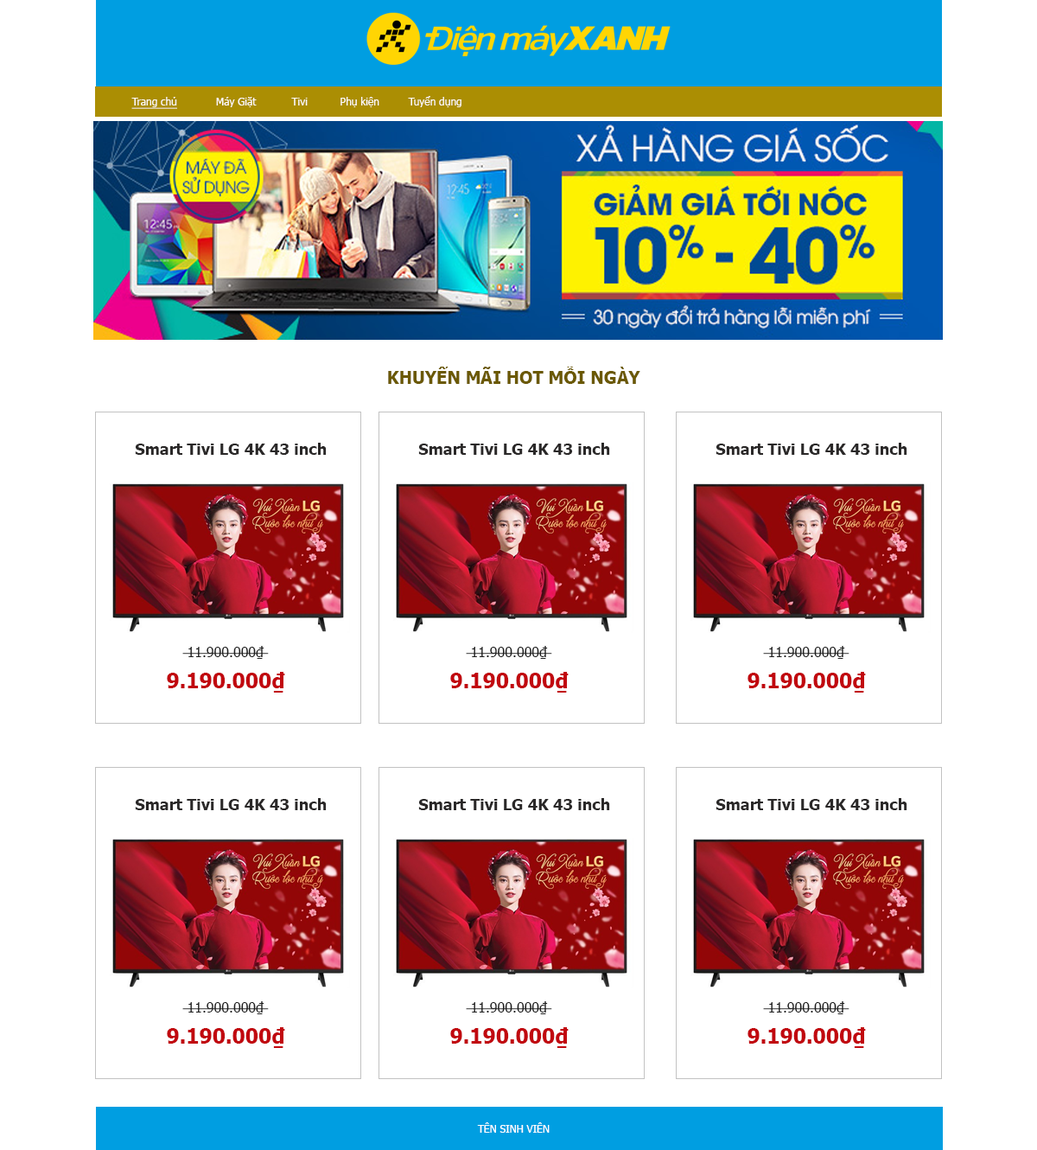
<style>
.page{position:relative;width:1037px;height:1150px;background:#ffffff}
.page>*{position:absolute;margin:0}
.t1{font:10.4px "Tahoma";color:#fefbfb}
.t2{font:10.4px "Tahoma";color:#fefbfb;text-decoration:underline}
.t3{font:17.3px "Tahoma-Bold";color:#6b5902}
.t4{font:15.6px "Tahoma-Bold";color:#2a2828}
.t5{font:13.8px/31.1px "Tahoma";color:#1d1d1d}
.t6{font:20.7px/31.1px "Tahoma-Bold";color:#c1080f}
.t7{font:10.4px "Tahoma";color:#ffffff}
</style>
<div class="page">
<p class="t1" style="left:131px;top:96px;width:331px;height:13px"><span class="t2">Trang chủ</span>            Máy Giặt           Tivi          Phụ kiện         Tuyển dụng</p>
<p class="t3" style="left:388px;top:366px;width:252px;height:18px">KHUYẾN MÃI HOT MỖI NGÀY</p>
<p class="t4" style="left:135px;top:443px;width:192px;height:12px">Smart Tivi LG 4K 43 inch</p>
<p class="t4" style="left:418px;top:443px;width:192px;height:12px">Smart Tivi LG 4K 43 inch</p>
<p class="t4" style="left:716px;top:443px;width:192px;height:12px">Smart Tivi LG 4K 43 inch</p>
<p class="t5" style="left:167px;top:646px;width:118px;height:46px;text-align:center">11.900.000₫ <br><span class="t6">9.190.000₫</span></p>
<p class="t5" style="left:450px;top:646px;width:119px;height:46px;text-align:center">11.900.000₫ <br><span class="t6">9.190.000₫</span></p>
<p class="t5" style="left:748px;top:646px;width:118px;height:46px;text-align:center">11.900.000₫ <br><span class="t6">9.190.000₫</span></p>
<p class="t4" style="left:135px;top:798px;width:192px;height:12px">Smart Tivi LG 4K 43 inch</p>
<p class="t4" style="left:418px;top:798px;width:192px;height:12px">Smart Tivi LG 4K 43 inch</p>
<p class="t4" style="left:716px;top:798px;width:192px;height:12px">Smart Tivi LG 4K 43 inch</p>
<p class="t5" style="left:167px;top:1001px;width:118px;height:47px;text-align:center">11.900.000₫ <br><span class="t6">9.190.000₫</span></p>
<p class="t5" style="left:450px;top:1001px;width:119px;height:47px;text-align:center">11.900.000₫ <br><span class="t6">9.190.000₫</span></p>
<p class="t5" style="left:748px;top:1001px;width:118px;height:47px;text-align:center">11.900.000₫ <br><span class="t6">9.190.000₫</span></p>
<p class="t7" style="left:477px;top:1122px;width:73px;height:10px">TÊN SINH VIÊN</p>
</div>
